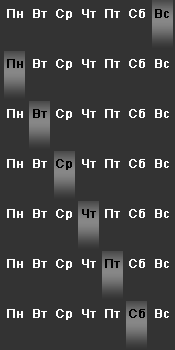
<style>
.page{position:relative;width:175px;height:350px;background:#333333}
.page>*{position:absolute;margin:0}
.t1{font:12px "ArialMT";color:#ffffff;font-weight:bold}
.t2{font:12px "ArialMT";color:#000000;font-weight:bold}
</style>
<div class="page">
<p class="t1" style="left:7px;top:9px;width:162px;height:11px">Пн  Вт  Ср  Чт  Пт  Сб  <span class="t2">Вс</span></p>
<p class="t1" style="left:7px;top:59px;width:162px;height:11px"><span class="t2">Пн</span>  Вт  Ср  Чт  Пт  Сб  Вс</p>
<p class="t1" style="left:7px;top:109px;width:162px;height:11px">Пн  <span class="t2">Вт</span>  Ср  Чт  Пт  Сб  Вс</p>
<p class="t1" style="left:7px;top:159px;width:162px;height:11px">Пн  Вт  <span class="t2">Ср</span>  Чт  Пт  Сб  Вс</p>
<p class="t1" style="left:7px;top:209px;width:162px;height:11px">Пн  Вт  Ср  <span class="t2">Чт</span>  Пт  Сб  Вс</p>
<p class="t1" style="left:7px;top:259px;width:162px;height:11px">Пн  Вт  Ср  Чт  <span class="t2">Пт</span>  Сб  Вс</p>
<p class="t1" style="left:7px;top:309px;width:162px;height:11px">Пн  Вт  Ср  Чт  Пт  <span class="t2">Сб</span>  Вс</p>
</div>
